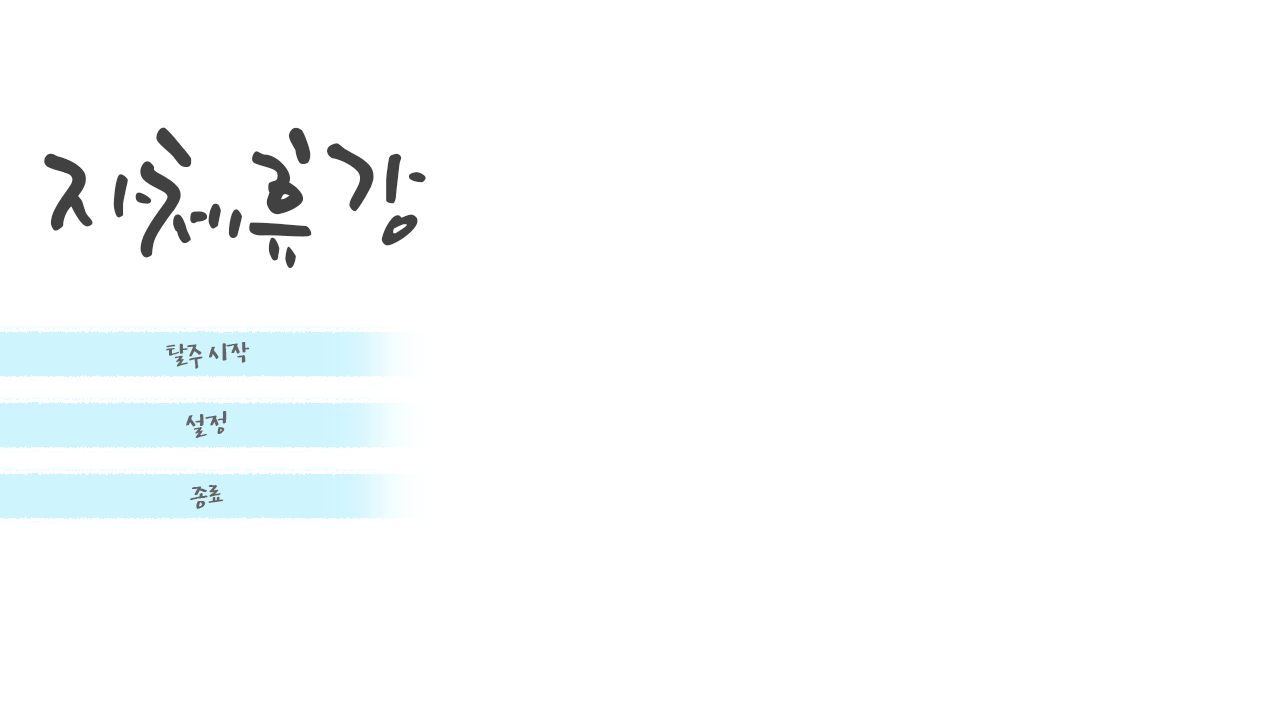
<style>
.page{position:relative;width:1280px;height:720px;background:#ffffff}
.page>*{position:absolute;margin:0}
.t1{font:150px "YoonSHS";letter-spacing:-0.18em;color:#424242}
.t2{font:36px "YunTaemin";letter-spacing:-0.05em;color:#646464}
</style>
<div class="page">
<p class="t1" style="left:44px;top:127px;width:382px;height:141px">자체휴강</p>
<p class="t2" style="left:166px;top:342px;width:84px;height:27px">탈주 시작</p>
<p class="t2" style="left:186px;top:411px;width:41px;height:27px">설정</p>
<p class="t2" style="left:190px;top:485px;width:34px;height:24px">종료</p>
</div>
